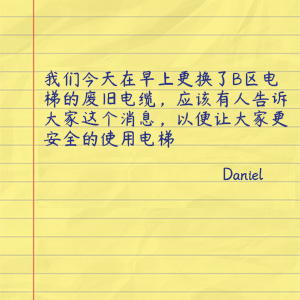
<style>
.page{position:relative;width:300px;height:300px}
.page>*{position:absolute;margin:0}
.t1{font:19px/20px "YRDZST-Medium";color:#253389}
.t2{font:19px/15px "YRDZST-Medium";color:#253389}
</style>
<div class="page">
<p class="t1" style="left:43px;top:70px;width:245px;height:111px">我们今天在早上更换了B区电<br>梯的废旧电缆，应该有人告诉<br>大家这个消息，以便让大家更<br>安全的使用电梯<br><span class="t2"><br>     Daniel</span></p>
</div>
